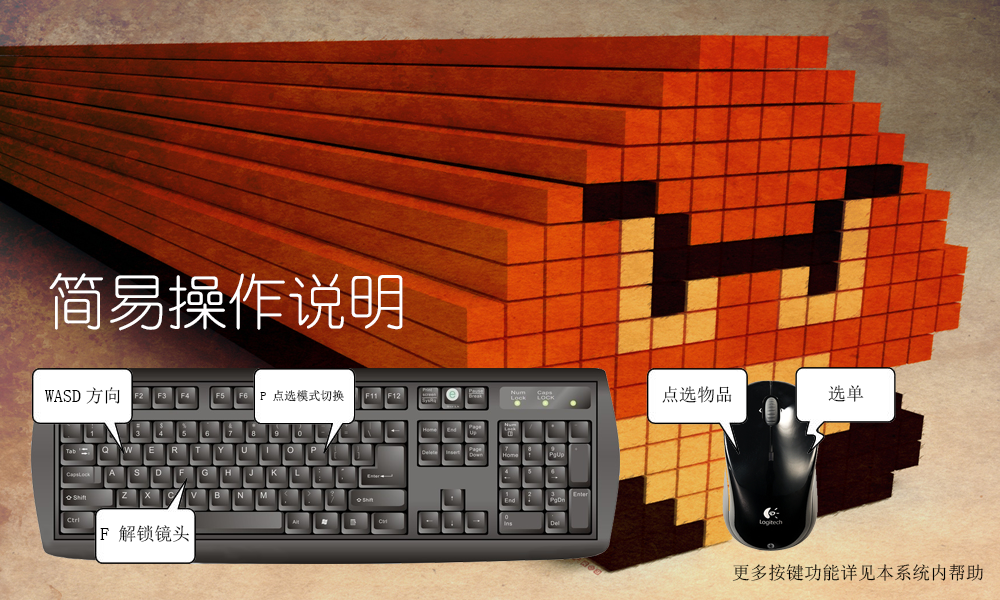
<style>
.page{position:relative;width:1000px;height:600px}
.page>*{position:absolute;margin:0}
.t1{font:60px "YouYuan";color:#ffffff}
.t2{font:18px "SimSun";color:#000000}
.t3{font:12px "SimSun";color:#000000}
.t4{font:18px "SimSun";color:#010101}
</style>
<div class="page">
<p class="t1" style="left:49px;top:273px;width:354px;height:58px">简易操作说明</p>
<p class="t2" style="left:45px;top:387px;width:75px;height:17px">WASD方向</p>
<p class="t3" style="left:260px;top:390px;width:84px;height:12px">P 点选模式切换</p>
<p class="t4" style="left:662px;top:386px;width:70px;height:17px">点选物品</p>
<p class="t2" style="left:828px;top:385px;width:36px;height:17px">选单</p>
<p class="t2" style="left:100px;top:525px;width:89px;height:17px">F 解锁镜头</p>
<p class="t2" style="left:732px;top:564px;width:251px;height:17px">更多按键功能详见本系统内帮助</p>
</div>
